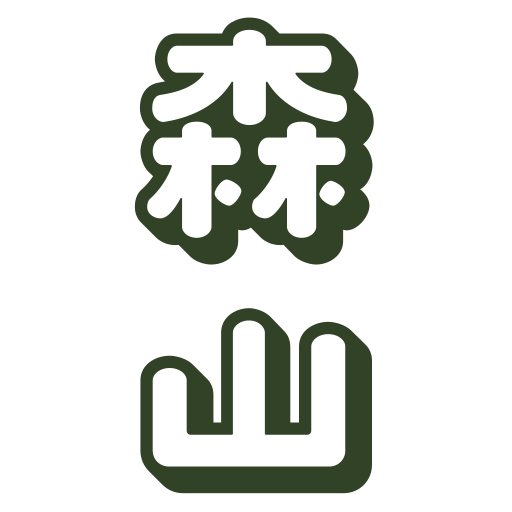
<style>
.page{position:relative;width:512px;height:512px;background:#ffffff}
.page>*{position:absolute;margin:0}
.t1{font:252.9px/258.4px "VDL-MegaMaru-pop-Shadow";color:#314227;font-weight:bold}
</style>
<div class="page">
<p class="t1" style="left:134px;top:17px;width:240px;height:477px;text-align:center">森<br>山</p>
</div>
